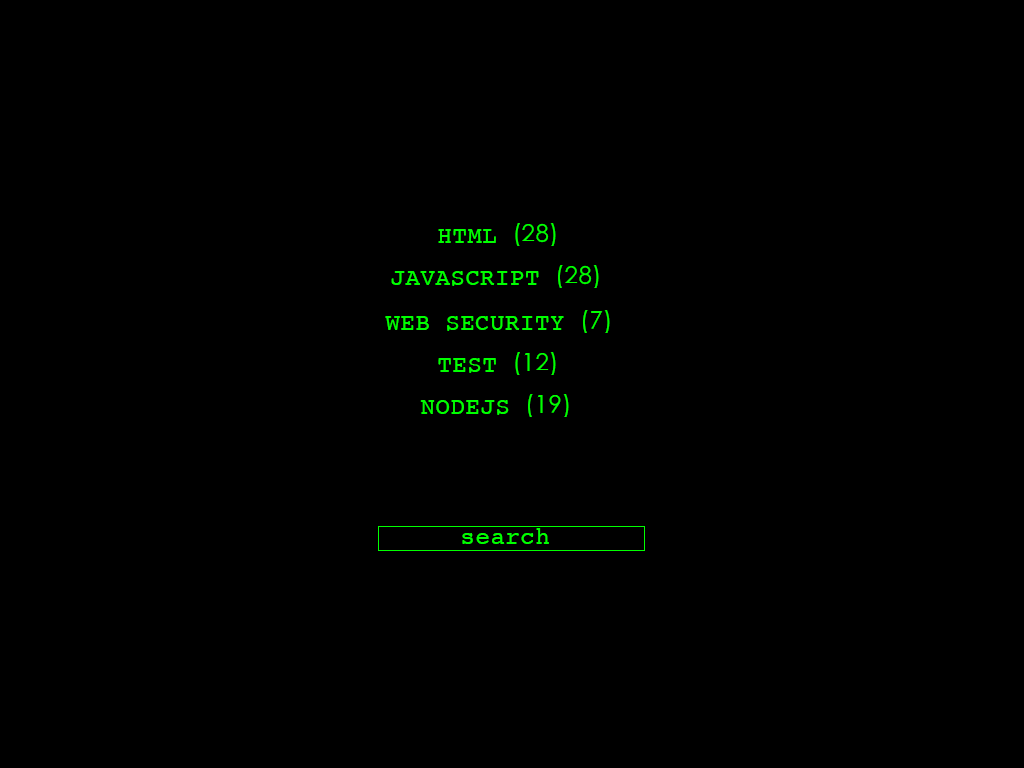
<style>
.page{position:relative;width:1024px;height:768px;background:#000000}
.page>*{position:absolute;margin:0}
.t1{font:24px "Courier";letter-spacing:0.024em;color:#00ff00}
.t2{font:24px "STHeitiSC-Light";letter-spacing:0.024em;color:#00ff00}
</style>
<div class="page">
<p class="t1" style="left:438px;top:223px;width:118px;height:23px">HTML <span class="t2">(28)</span></p>
<p class="t1" style="left:391px;top:265px;width:208px;height:23px">JAVASCRIPT <span class="t2">(28)</span></p>
<p class="t1" style="left:385px;top:310px;width:225px;height:23px">WEB SECURITY <span class="t2">(7)</span></p>
<p class="t1" style="left:438px;top:352px;width:118px;height:23px">TEST <span class="t2">(12)</span></p>
<p class="t1" style="left:420px;top:394px;width:149px;height:23px">NODEJS <span class="t2">(19)</span></p>
<p class="t1" style="left:462px;top:528px;width:87px;height:16px">search</p>
</div>
